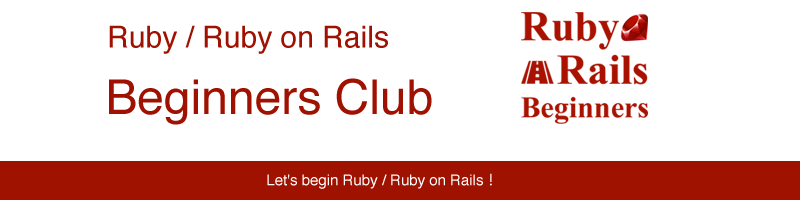
<style>
.page{position:relative;width:800px;height:200px;background:#ffffff}
.page>*{position:absolute;margin:0}
.t1{font:30px "Helvetica";color:#9f1100}
.t2{font:48px "Helvetica";color:#9f1100}
.t3{font:15px "Helvetica";color:#ffffff}
.t4{font:15px "KozGoPr6N-Regular";color:#ffffff}
</style>
<div class="page">
<p class="t1" style="left:109px;top:25px;width:279px;height:29px">Ruby / Ruby on Rails</p>
<p class="t2" style="left:109px;top:78px;width:323px;height:47px">Beginners Club</p>
<p class="t3" style="left:267px;top:173px;width:225px;height:16px">Let's begin Ruby / Ruby on Rails<span class="t4">！</span></p>
</div>
